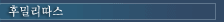
<style>
.page{position:relative;width:224px;height:22px;background:#314965}
.page>*{position:absolute;margin:0}
.t1{font:12.1px "BatangChe";color:#ffffff;scale:0.91 1}
</style>
<div class="page">
<p class="t1" style="left:8px;top:5px;width:55px;height:13px">후밀리따스</p>
</div>
